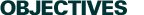
<style>
.page{position:relative;width:144px;height:15px;background:#ffffff}
.page>*{position:absolute;margin:0}
.t1{font:20px "Univers-Black";letter-spacing:-0.04em;color:#003333}
</style>
<div class="page">
<p class="t1" style="left:0px;top:0px;width:127px;height:16px">OBJECTIVES</p>
</div>
